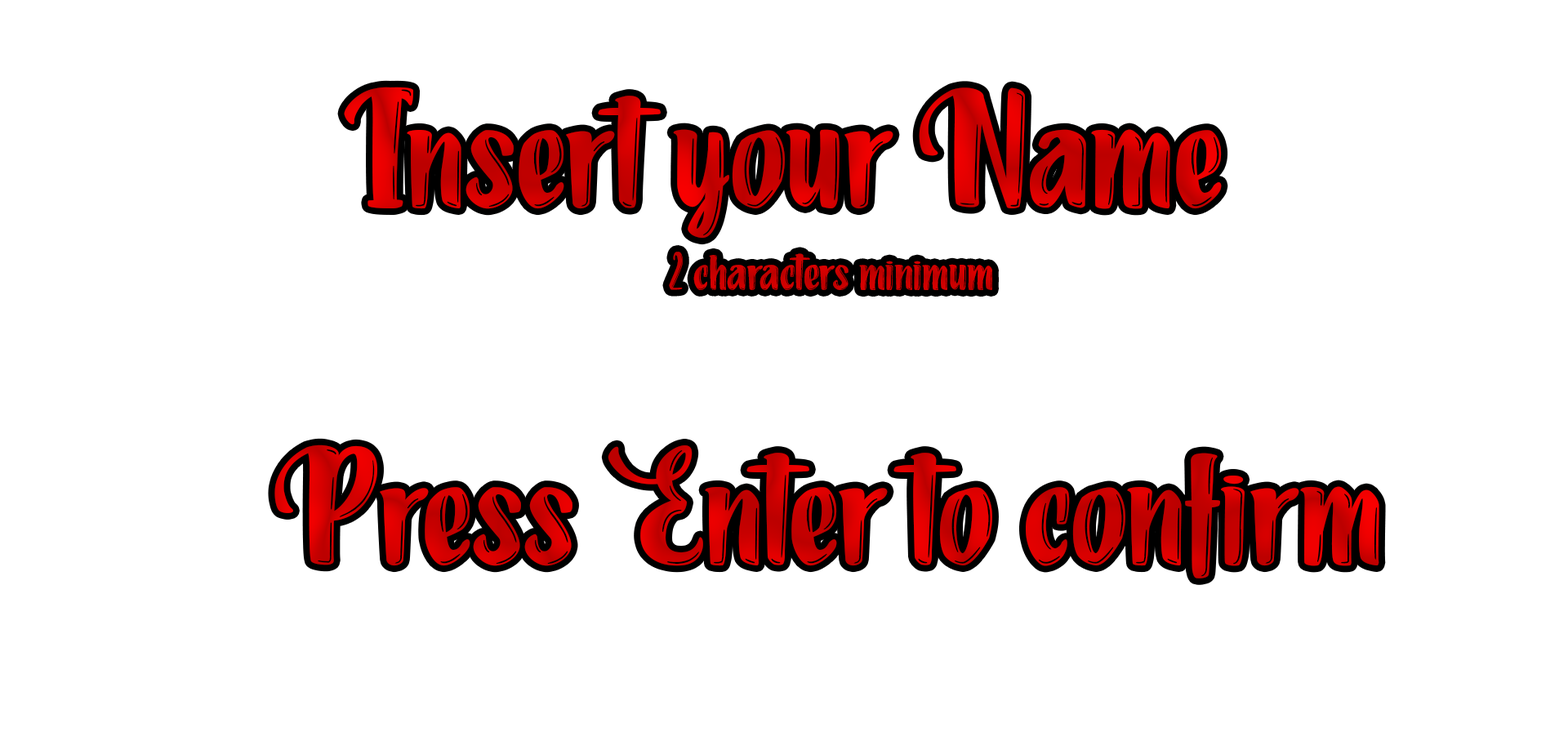
<style>
.page{position:relative;width:1568px;height:737px;background:#ffffff}
.page>*{position:absolute;margin:0}
.t1{font:204.1px "QuarkCheese-PersonalUse";color:#ce0000}
.t2{font:65.3px "QuarkCheese-PersonalUse";color:#ca0000}
.t3{font:204.1px "QuarkCheese-PersonalUse";color:#d00000}
</style>
<div class="page">
<p class="t1" style="left:344px;top:87px;width:878px;height:151px">Insert your Name</p>
<p class="t2" style="left:669px;top:252px;width:323px;height:38px">2 characters minimum</p>
<p class="t3" style="left:274px;top:444px;width:1105px;height:134px">Press Enter to confirm</p>
</div>
